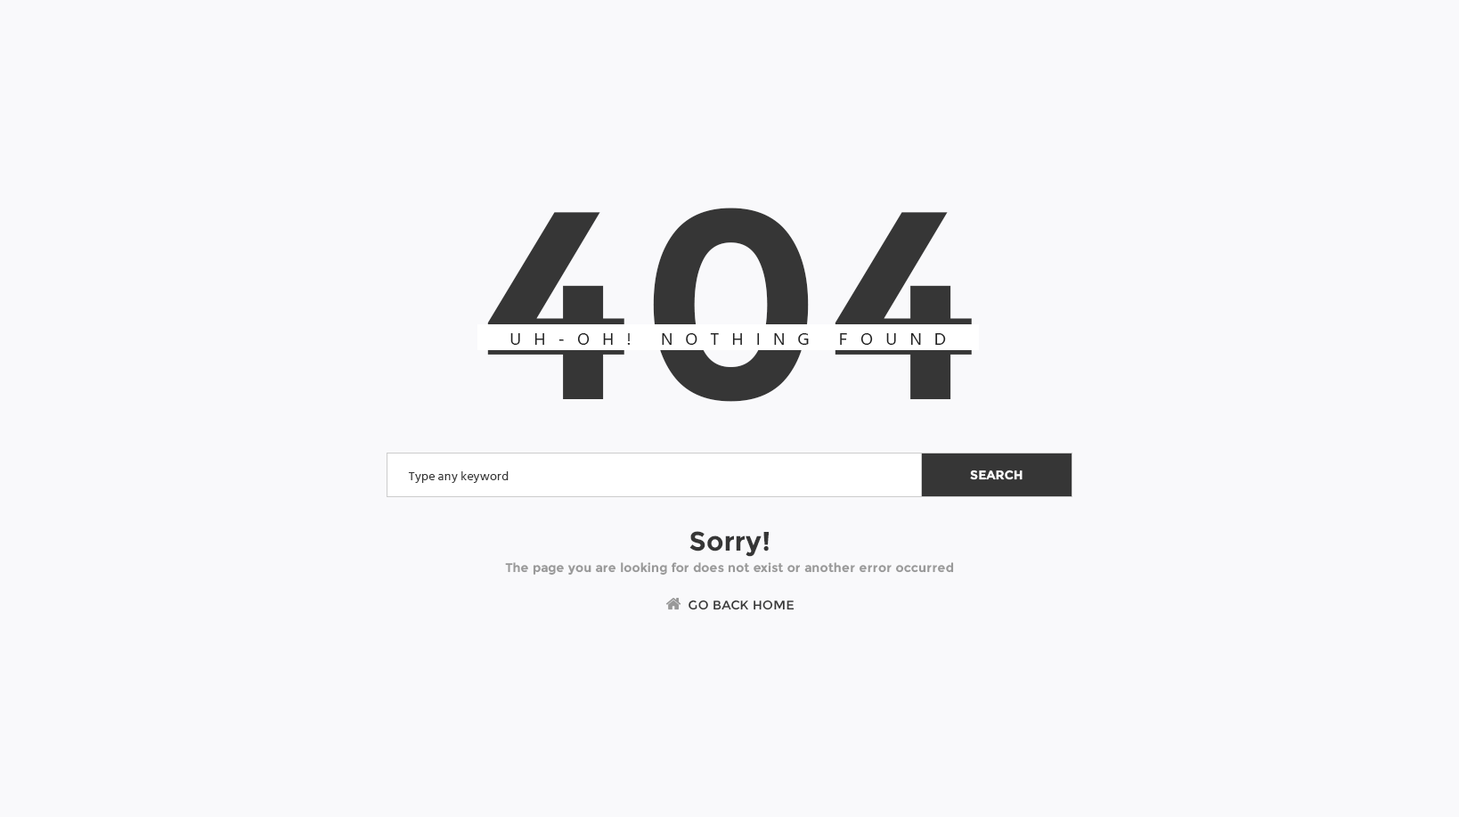
<style>
.page{position:relative;width:1459px;height:817px;background:#f9f9fb}
.page>*{position:absolute;margin:0}
.t1{font:267.3px "Montserrat-Bold";letter-spacing:0.012em;color:#363636}
.t2{font:17.8px "Hind-Regular";letter-spacing:0.712em;color:#212121;text-transform:uppercase}
.t3{font:12.5px "Hind-Regular";letter-spacing:0.012em;color:#363636}
.t4{font:12.5px "Montserrat-Bold";letter-spacing:0.012em;color:#ffffff}
.t5{font:12.5px/21.4px "Montserrat-Bold";letter-spacing:0.012em;color:#999999}
.t6{font:26.7px/21.4px "Montserrat-Bold";letter-spacing:0.012em;color:#363636}
.t7{font:12.5px "Montserrat-Regular";letter-spacing:0.012em;color:#363636}
</style>
<div class="page">
<p class="t1" style="left:487px;top:208px;width:485px;height:194px">404</p>
<p class="t2" style="left:511px;top:333px;width:435px;height:12px">Uh-oh! nothing found</p>
<p class="t3" style="left:408px;top:471px;width:101px;height:12px">Type any keyword</p>
<p class="t4" style="left:970px;top:470px;width:53px;height:10px">SEARCH</p>
<p class="t5" style="left:505px;top:531px;width:449px;height:45px;text-align:center"><span class="t6">Sorry!<br></span>The page you are looking for does not exist or another error occurred</p>
<p class="t7" style="left:689px;top:600px;width:106px;height:10px">GO BACK HOME</p>
</div>
